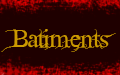
<style>
.page{position:relative;width:120px;height:75px;background:#1f0000}
.page>*{position:absolute;margin:0}
.t1{font:26px "FairydustB";color:#cb9900}
</style>
<div class="page">
<p class="t1" style="left:1px;top:29px;width:115px;height:23px">Batiments</p>
</div>
